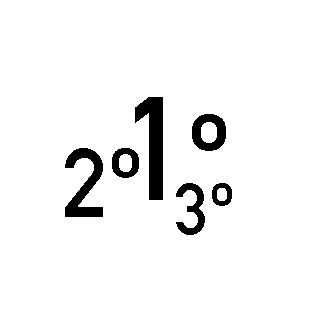
<style>
.page{position:relative;width:320px;height:320px;background:#ffffff}
.page>*{position:absolute;margin:0}
.t1{font:144px "DINAlternate-Bold";color:#000000}
.t2{font:120px "DINAlternate-Bold";color:#000000}
.t3{font:96px "DINAlternate-Bold";color:#000000}
.t4{font:72px "DINAlternate-Bold";color:#000000}
</style>
<div class="page">
<p class="t1" style="left:135px;top:97px;width:91px;height:103px">1<span class="t2">º</span></p>
<p class="t3" style="left:65px;top:148px;width:74px;height:69px">2º</p>
<p class="t4" style="left:176px;top:183px;width:56px;height:52px">3º</p>
</div>
